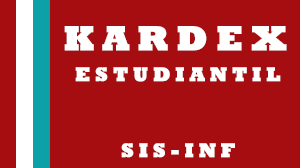
<style>
.page{position:relative;width:300px;height:168px;background:#a60d10}
.page>*{position:absolute;margin:0}
.t1{font:35.6px "Rockwell-ExtraBold";letter-spacing:0.212em;color:#ffffff;text-transform:uppercase;font-weight:bold}
.t2{font:20.3px "Rockwell-ExtraBold";letter-spacing:0.212em;color:#ffffff;text-transform:uppercase;font-weight:bold}
</style>
<div class="page">
<p class="t1" style="left:64px;top:26px;width:223px;height:25px">kardex</p>
<p class="t2" style="left:75px;top:67px;width:206px;height:15px">estudiantil</p>
<p class="t2" style="left:121px;top:143px;width:114px;height:15px">sis-inf</p>
</div>
